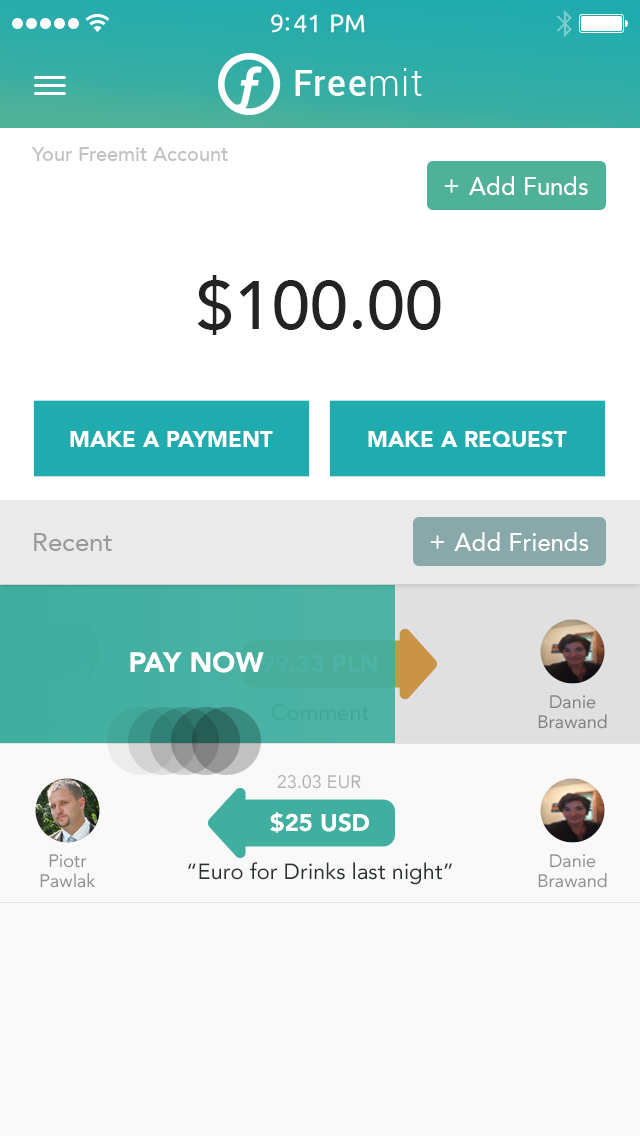
<style>
.page{position:relative;width:640px;height:1136px;background:#f9f9f9}
.page>*{position:absolute;margin:0}
.t1{font:25px "Ubuntu";color:#ffffff}
.t2{font:20px "Avenir-Medium";color:#c2c2c2}
.t3{font:24px "Avenir-Medium";color:#ffffff}
.t4{font:68px "Avenir-Medium";color:#222325}
.t5{font:22px "Avenir-Black";color:#ffffff;text-transform:uppercase}
.t6{font:26px "Avenir-Roman";color:#999999}
.t7{font:28px "Avenir-Black";color:#ffffff;text-transform:uppercase}
.t8{font:24px "Avenir-Black";color:#4bb3a5}
.t9{font:18px/20px "Avenir-Roman";color:#828282}
.t10{font:22px "Avenir-Roman";color:#3ea698}
.t11{font:18px "Avenir-Roman";color:#b0b2b2}
.t12{font:24px "Avenir-Black";color:#ffffff}
.t13{font:18px/20px "Avenir-Roman";color:#919191}
.t14{font:22px "Avenir-Roman";color:#2a3231}
</style>
<div class="page">
<p class="t1" style="left:271px;top:14px;width:94px;height:19px">9:41 PM</p>
<p class="t2" style="left:31px;top:147px;width:197px;height:14px">Your Freemit Account</p>
<p class="t3" style="left:469px;top:176px;width:119px;height:19px">Add Funds</p>
<p class="t4" style="left:197px;top:275px;width:244px;height:60px">$100.00</p>
<p class="t5" style="left:70px;top:431px;width:203px;height:16px">Make a Payment</p>
<p class="t5" style="left:368px;top:431px;width:199px;height:16px">Make a request</p>
<p class="t6" style="left:34px;top:533px;width:78px;height:18px">Recent</p>
<p class="t3" style="left:454px;top:532px;width:135px;height:19px">Add Friends</p>
<p class="t7" style="left:130px;top:651px;width:134px;height:22px">Pay Now</p>
<p class="t8" style="left:261px;top:654px;width:117px;height:19px">99.33 PLN</p>
<p class="t9" style="left:538px;top:695px;width:69px;height:34px;text-align:center">Danie Brawand</p>
<p class="t10" style="left:271px;top:704px;width:98px;height:17px">Comment</p>
<p class="t11" style="left:277px;top:775px;width:84px;height:14px">23.03 EUR</p>
<p class="t12" style="left:270px;top:812px;width:99px;height:21px">$25 USD</p>
<p class="t13" style="left:40px;top:854px;width:56px;height:34px;text-align:center">Piotr Pawlak</p>
<p class="t13" style="left:538px;top:854px;width:69px;height:34px;text-align:center">Danie Brawand</p>
<p class="t14" style="left:188px;top:862px;width:264px;height:23px">“Euro for Drinks last night”</p>
</div>
